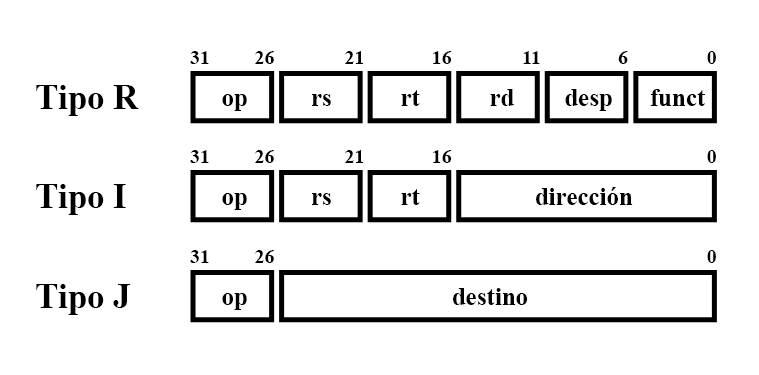
<style>
.page{position:relative;width:759px;height:375px;background:#ffffff}
.page>*{position:absolute;margin:0}
.t1{font:20px "TimesNewRomanPS-BoldMT";color:#000000}
.t2{font:35px "TimesNewRomanPS-BoldMT";color:#000000}
.t3{font:25px "TimesNewRomanPS-BoldMT";color:#000000}
</style>
<div class="page">
<p class="t1" style="left:190px;top:51px;width:19px;height:13px">31</p>
<p class="t1" style="left:255px;top:51px;width:19px;height:13px">26</p>
<p class="t1" style="left:345px;top:51px;width:18px;height:13px">21</p>
<p class="t1" style="left:433px;top:51px;width:19px;height:13px">16</p>
<p class="t1" style="left:523px;top:51px;width:17px;height:13px">11</p>
<p class="t1" style="left:618px;top:51px;width:10px;height:13px">6</p>
<p class="t1" style="left:707px;top:51px;width:9px;height:13px">0</p>
<p class="t2" style="left:36px;top:85px;width:103px;height:31px">Tipo R</p>
<p class="t3" style="left:490px;top:89px;width:24px;height:17px">rd</p>
<p class="t3" style="left:565px;top:89px;width:47px;height:22px">desp</p>
<p class="t3" style="left:650px;top:89px;width:55px;height:17px">funct</p>
<p class="t3" style="left:222px;top:94px;width:25px;height:17px">op</p>
<p class="t3" style="left:312px;top:94px;width:19px;height:12px">rs</p>
<p class="t3" style="left:401px;top:90px;width:19px;height:16px">rt</p>
<p class="t1" style="left:190px;top:150px;width:19px;height:13px">31</p>
<p class="t1" style="left:255px;top:150px;width:19px;height:13px">26</p>
<p class="t1" style="left:345px;top:150px;width:18px;height:13px">21</p>
<p class="t1" style="left:433px;top:150px;width:19px;height:13px">16</p>
<p class="t1" style="left:707px;top:150px;width:9px;height:13px">0</p>
<p class="t2" style="left:36px;top:184px;width:90px;height:31px">Tipo I</p>
<p class="t3" style="left:222px;top:193px;width:25px;height:17px">op</p>
<p class="t3" style="left:312px;top:193px;width:19px;height:12px">rs</p>
<p class="t3" style="left:401px;top:189px;width:19px;height:16px">rt</p>
<p class="t3" style="left:536px;top:187px;width:97px;height:18px">dirección</p>
<p class="t1" style="left:190px;top:250px;width:19px;height:13px">31</p>
<p class="t1" style="left:255px;top:250px;width:19px;height:13px">26</p>
<p class="t1" style="left:707px;top:250px;width:9px;height:13px">0</p>
<p class="t2" style="left:36px;top:284px;width:95px;height:31px">Tipo J</p>
<p class="t3" style="left:222px;top:293px;width:25px;height:17px">op</p>
<p class="t3" style="left:453px;top:288px;width:75px;height:17px">destino</p>
</div>
